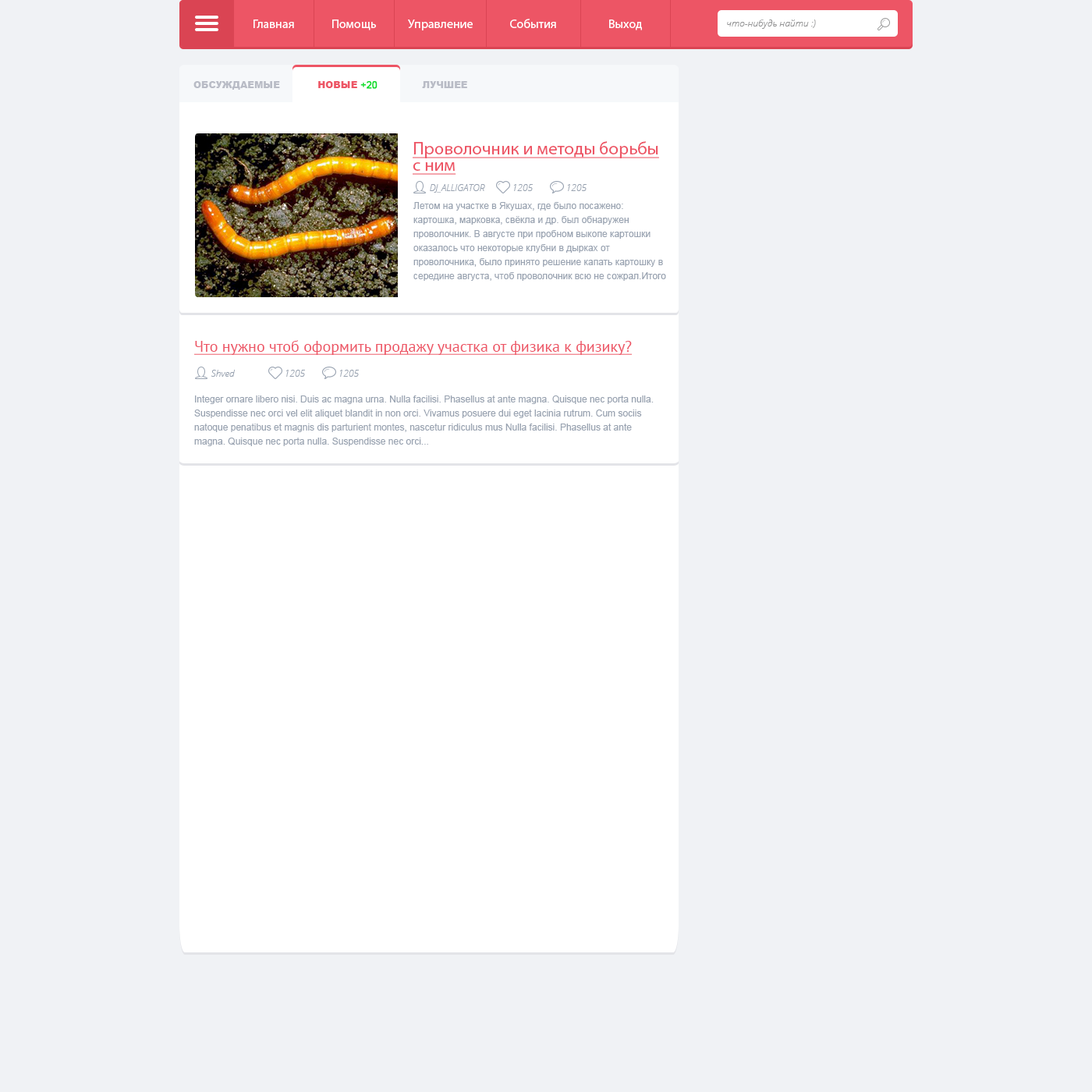
<style>
.page{position:relative;width:1092px;height:1092px;background:#f0f2f5}
.page>*{position:absolute;margin:0}
.t1{font:12.5px "OpenSans-Light";color:#ffffff}
.t2{font:9.4px "OpenSansLight-Italic";color:#959596}
.t3{font:9.4px "Arial-Black";color:#b9bcc6;text-transform:uppercase}
.t4{font:9.4px "Arial-Black";color:#ed5565;text-transform:uppercase}
.t5{font:9.4px "ArialMT";color:#0dde2b;text-transform:uppercase;font-weight:bold}
.t6{font:17.9px/16.4px "MyriadPro-Regular";color:#ed5565;text-decoration:underline}
.t7{font:9.4px "OpenSansLight-Italic";color:#99a3b1}
.t8{font:9.4px/14px "ArialMT";color:#99a3b1}
.t9{font:15.6px "PTSans-Regular";color:#ed5565;text-decoration:underline}
</style>
<div class="page">
<p class="t1" style="left:253px;top:19px;width:41px;height:9px">Главная</p>
<p class="t1" style="left:332px;top:19px;width:44px;height:11px">Помощь</p>
<p class="t1" style="left:408px;top:19px;width:65px;height:11px">Управление</p>
<p class="t1" style="left:510px;top:19px;width:46px;height:9px">События</p>
<p class="t1" style="left:609px;top:19px;width:33px;height:11px">Выход</p>
<p class="t2" style="left:727px;top:19px;width:89px;height:10px">что-нибудь найти :)</p>
<p class="t3" style="left:193px;top:81px;width:87px;height:9px">Обсуждаемые</p>
<p class="t4" style="left:318px;top:81px;width:60px;height:8px">Новые <span class="t5">+20</span></p>
<p class="t3" style="left:422px;top:81px;width:45px;height:7px">Лучшее</p>
<p class="t6" style="left:413px;top:141px;width:246px;height:34px">Проволочник и методы борьбы<br>с ним</p>
<p class="t7" style="left:430px;top:184px;width:55px;height:9px">DJ_ALLIGATOR</p>
<p class="t7" style="left:513px;top:184px;width:20px;height:7px">1205</p>
<p class="t7" style="left:567px;top:184px;width:20px;height:7px">1205</p>
<p class="t8" style="left:413px;top:202px;width:253px;height:79px">Летом на участке в Якушах, где было посажено: картошка, марковка, свёкла и др. был обнаружен проволочник. В августе при пробном выкопе картошки оказалось что некоторые клубни в дырках от проволочника, было принято решение капать картошку в середине августа, чтоб проволочник всю не сожрал.Итого около 2 мешков было поедено проволочником. На 2 раза пришлось перебирать картошку, чтоб точно не было поеденной, так как в ямке будет она очень быстро портиться.</p>
<p class="t9" style="left:194px;top:340px;width:439px;height:15px">Что нужно чтоб оформить продажу участка от физика к физику?</p>
<p class="t7" style="left:211px;top:370px;width:24px;height:7px">Shved</p>
<p class="t7" style="left:285px;top:370px;width:20px;height:7px">1205</p>
<p class="t7" style="left:339px;top:370px;width:20px;height:7px">1205</p>
<p class="t8" style="left:194px;top:395px;width:460px;height:51px">Integer ornare libero nisi. Duis ac magna urna. Nulla facilisi. Phasellus at ante magna. Quisque nec porta nulla. Suspendisse nec orci vel elit aliquet blandit in non orci. Vivamus posuere dui eget lacinia rutrum. Cum sociis natoque penatibus et magnis dis parturient montes, nascetur ridiculus mus Nulla facilisi. Phasellus at ante magna. Quisque nec porta nulla. Suspendisse nec orci...</p>
</div>
